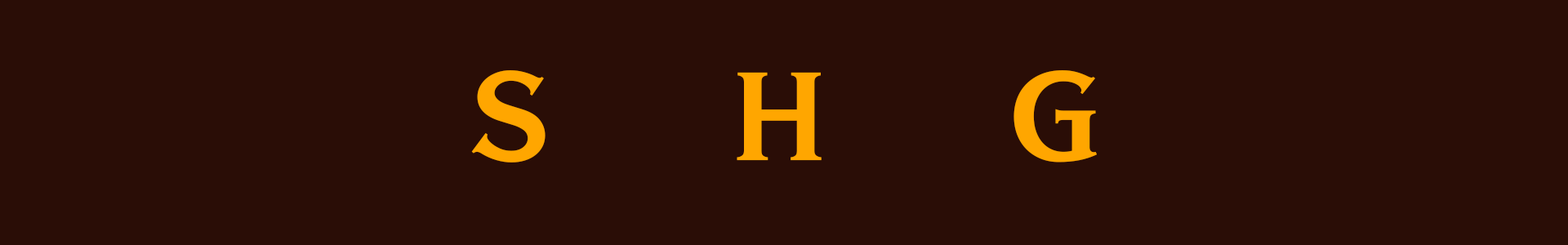
<style>
.page{position:relative;width:1568px;height:245px;background:#2a0d06}
.page>*{position:absolute;margin:0}
.t1{font:114.3px "WarhavenB";color:#ffa600}
</style>
<div class="page">
<p class="t1" style="left:471px;top:70px;width:626px;height:93px">S       H       G</p>
</div>
